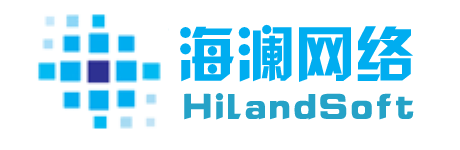
<style>
.page{position:relative;width:460px;height:150px;background:#ffffff}
.page>*{position:absolute;margin:0}
.t1{font:60px "HYk2gj";color:#00adf0}
.t2{font:37.3px "HYk2gj";letter-spacing:0.025em;color:#25a2c7}
</style>
<div class="page">
<p class="t1" style="left:180px;top:24px;width:233px;height:58px">海澜网络</p>
<p class="t2" style="left:184px;top:93px;width:230px;height:27px">HilandSoft</p>
</div>
